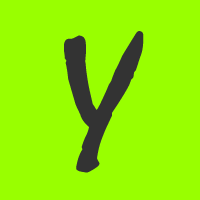
<style>
.page{position:relative;width:200px;height:200px;background:#99ff00}
.page>*{position:absolute;margin:0}
.t1{font:200px "Mistral";color:#333333}
</style>
<div class="page">
<p class="t1" style="left:64px;top:31px;width:80px;height:142px">Y</p>
</div>
